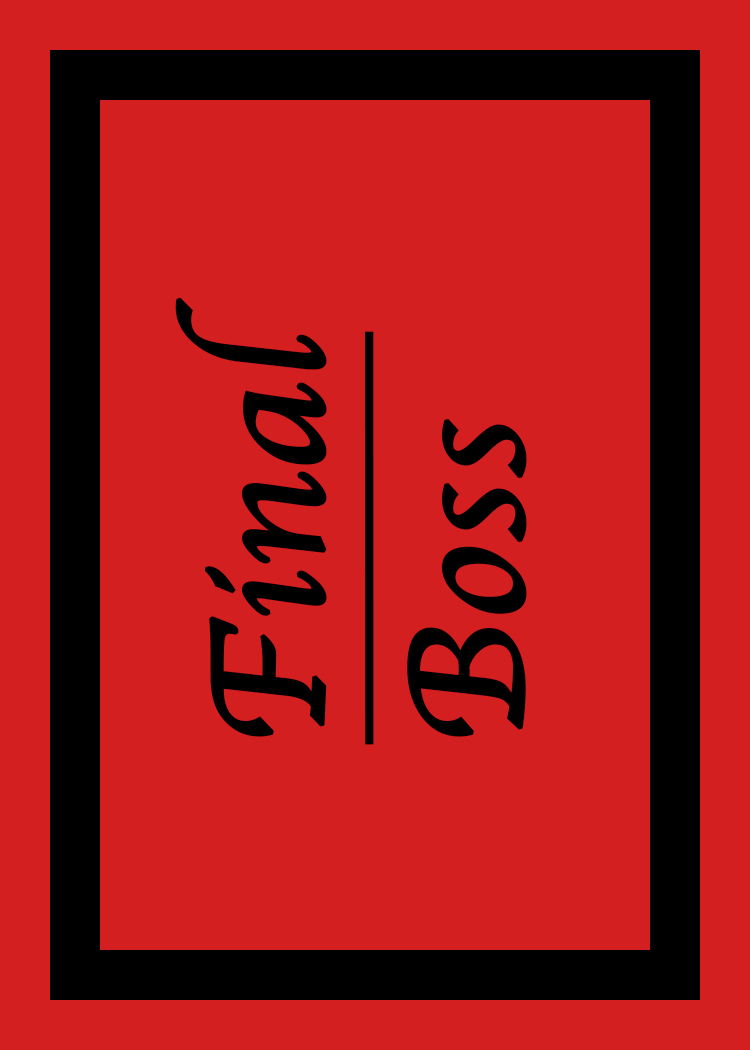
<style>
.page{position:relative;width:750px;height:1050px;background:#d31f1f}
.page>*{position:absolute;margin:0}
.t1{font:166.7px "Apple-Chancery";color:#000000;font-weight:bold;text-decoration:underline}
.t2{font:166.7px "Apple-Chancery";color:#000000;font-weight:bold}
</style>
<div class="page">
<p class="t1" style="left:175px;top:297px;width:352px;height:448px;rotate:-90deg">Final<br><span class="t2">Boss</span></p>
</div>
